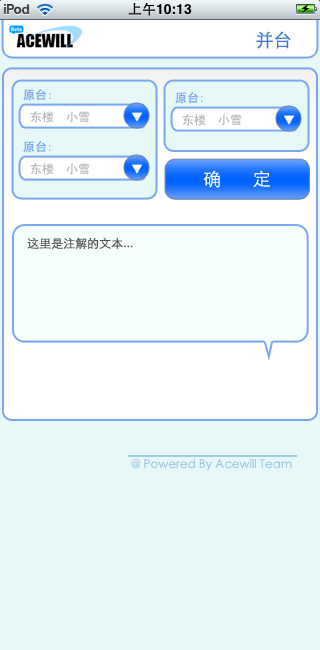
<style>
.page{position:relative;width:320px;height:650px;background:#e6f8f8}
.page>*{position:absolute;margin:0}
.t1{font:18px "STXihei";color:#3b77d7}
.t2{font:12px "SimHei";color:#79a8ef}
.t3{font:12px "SimHei";color:#bdbdbd}
.t4{font:18px "STXihei";color:#ffffff}
.t5{font:12px "STXihei";color:#505050}
.t6{font:12px "STXihei";color:#a2c8e5}
</style>
<div class="page">
<p class="t1" style="left:256px;top:31px;width:35px;height:18px">并台</p>
<p class="t2" style="left:23px;top:89px;width:28px;height:12px">原台:</p>
<p class="t2" style="left:175px;top:92px;width:28px;height:12px">原台:</p>
<p class="t3" style="left:30px;top:111px;width:60px;height:12px">东楼  小雪</p>
<p class="t3" style="left:182px;top:114px;width:60px;height:12px">东楼  小雪</p>
<p class="t2" style="left:23px;top:141px;width:28px;height:12px">原台:</p>
<p class="t3" style="left:30px;top:163px;width:60px;height:12px">东楼  小雪</p>
<p class="t4" style="left:203px;top:170px;width:67px;height:18px">确       定</p>
<p class="t5" style="left:27px;top:237px;width:106px;height:12px">这里是注解的文本...</p>
<p class="t6" style="left:131px;top:459px;width:161px;height:12px">@ Powered By Acewill Team</p>
</div>
